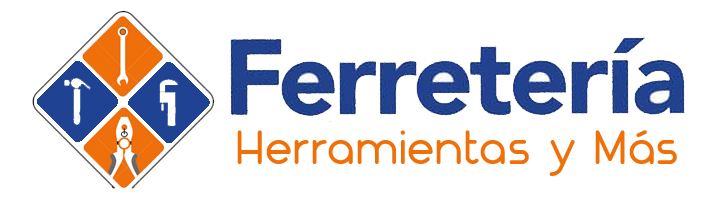
<style>
.page{position:relative;width:713px;height:200px;background:#ffffff}
.page>*{position:absolute;margin:0}
.t1{font:48px "Nokio-Medium";letter-spacing:-0.01em;color:#ef6f09}
</style>
<div class="page">
<p class="t1" style="left:237px;top:130px;width:440px;height:46px">Herramientas y Más</p>
</div>
